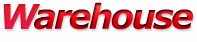
<style>
.page{position:relative;width:197px;height:42px;background:#fdfdfd}
.page>*{position:absolute;margin:0}
.t1{font:34.4px "Verdana-BoldItalic";letter-spacing:-0.075em;color:#ed1c24}
.t2{font:34.4px "Verdana-BoldItalic";letter-spacing:-0.075em}
</style>
<div class="page">
<p class="t1" style="left:3px;top:4px;width:37px;height:25px">W</p>
<p class="t2" style="left:34px;top:2px;width:159px;height:28px">arehouse</p>
</div>
